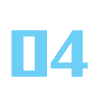
<style>
.page{position:relative;width:100px;height:100px;background:#ffffff}
.page>*{position:absolute;margin:0}
.t1{font:61px "MStiffHeiHKS-UltraBold";color:#6dcff6}
</style>
<div class="page">
<p class="t1" style="left:11px;top:30px;width:77px;height:47px">04</p>
</div>
